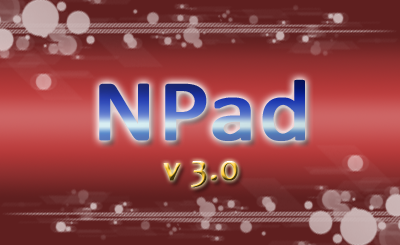
<style>
.page{position:relative;width:400px;height:245px}
.page>*{position:absolute;margin:0}
.t1{font:87.5px "Calibri";font-weight:bold;scale:1.12 1}
.t2{font:36px "Candara";font-weight:bold}
</style>
<div class="page">
<p class="t1" style="left:99px;top:79px;width:206px;height:62px">NPad</p>
<p class="t2" style="left:163px;top:161px;width:75px;height:27px">v 3.0</p>
</div>
